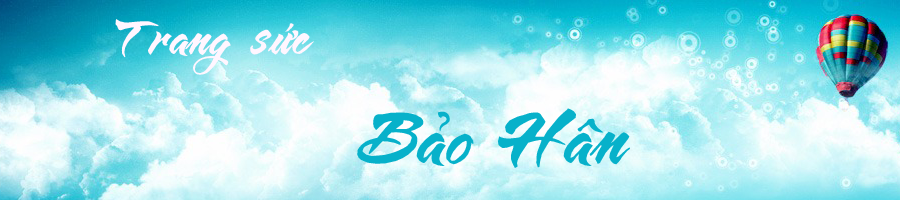
<style>
.page{position:relative;width:900px;height:200px}
.page>*{position:absolute;margin:0}
.t1{font:40px "VNI-Butlong";color:#fff6ff}
.t2{font:60px "VNI-Butlong";color:#07b1ca}
</style>
<div class="page">
<p class="t1" style="left:115px;top:19px;width:199px;height:56px">Trang söùc</p>
<p class="t2" style="left:357px;top:108px;width:273px;height:60px">Baûo Haân</p>
</div>
